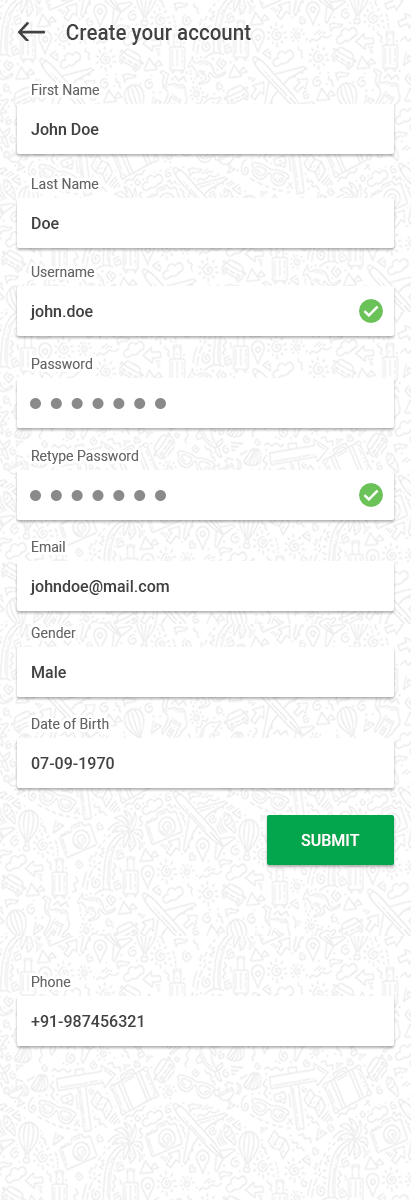
<style>
.page{position:relative;width:411px;height:1200px;background:#ffffff}
.page>*{position:absolute;margin:0}
.t1{font:21.4px "Heebo-Medium";color:#424242;scale:0.96 1}
.t2{font:14px "Heebo-Regular";color:#666666}
.t3{font:16px "Heebo-Medium";color:#424242}
.t4{font:16px "Heebo-Medium";color:#ffffff;text-transform:uppercase}
</style>
<div class="page">
<p class="t1" style="left:66px;top:24px;width:185px;height:21px">Create your account</p>
<p class="t2" style="left:32px;top:84px;width:67px;height:11px">First Name</p>
<p class="t3" style="left:31px;top:123px;width:68px;height:12px">John Doe</p>
<p class="t2" style="left:32px;top:178px;width:67px;height:11px">Last Name</p>
<p class="t3" style="left:32px;top:217px;width:27px;height:12px">Doe</p>
<p class="t2" style="left:31px;top:266px;width:63px;height:11px">Username</p>
<p class="t3" style="left:30px;top:305px;width:63px;height:15px">john.doe</p>
<p class="t2" style="left:32px;top:358px;width:60px;height:11px">Password</p>
<p class="t2" style="left:32px;top:450px;width:106px;height:14px">Retype Password</p>
<p class="t2" style="left:32px;top:541px;width:33px;height:11px">Email</p>
<p class="t3" style="left:30px;top:580px;width:139px;height:15px">johndoe@mail.com</p>
<p class="t2" style="left:31px;top:627px;width:45px;height:11px">Gender</p>
<p class="t3" style="left:32px;top:666px;width:34px;height:12px">Male</p>
<p class="t2" style="left:32px;top:718px;width:77px;height:11px">Date of Birth</p>
<p class="t3" style="left:31px;top:757px;width:83px;height:12px">07-09-1970</p>
<p class="t4" style="left:301px;top:834px;width:59px;height:12px">Submit</p>
<p class="t2" style="left:32px;top:976px;width:39px;height:11px">Phone</p>
<p class="t3" style="left:31px;top:1015px;width:112px;height:12px">+91-987456321</p>
</div>
